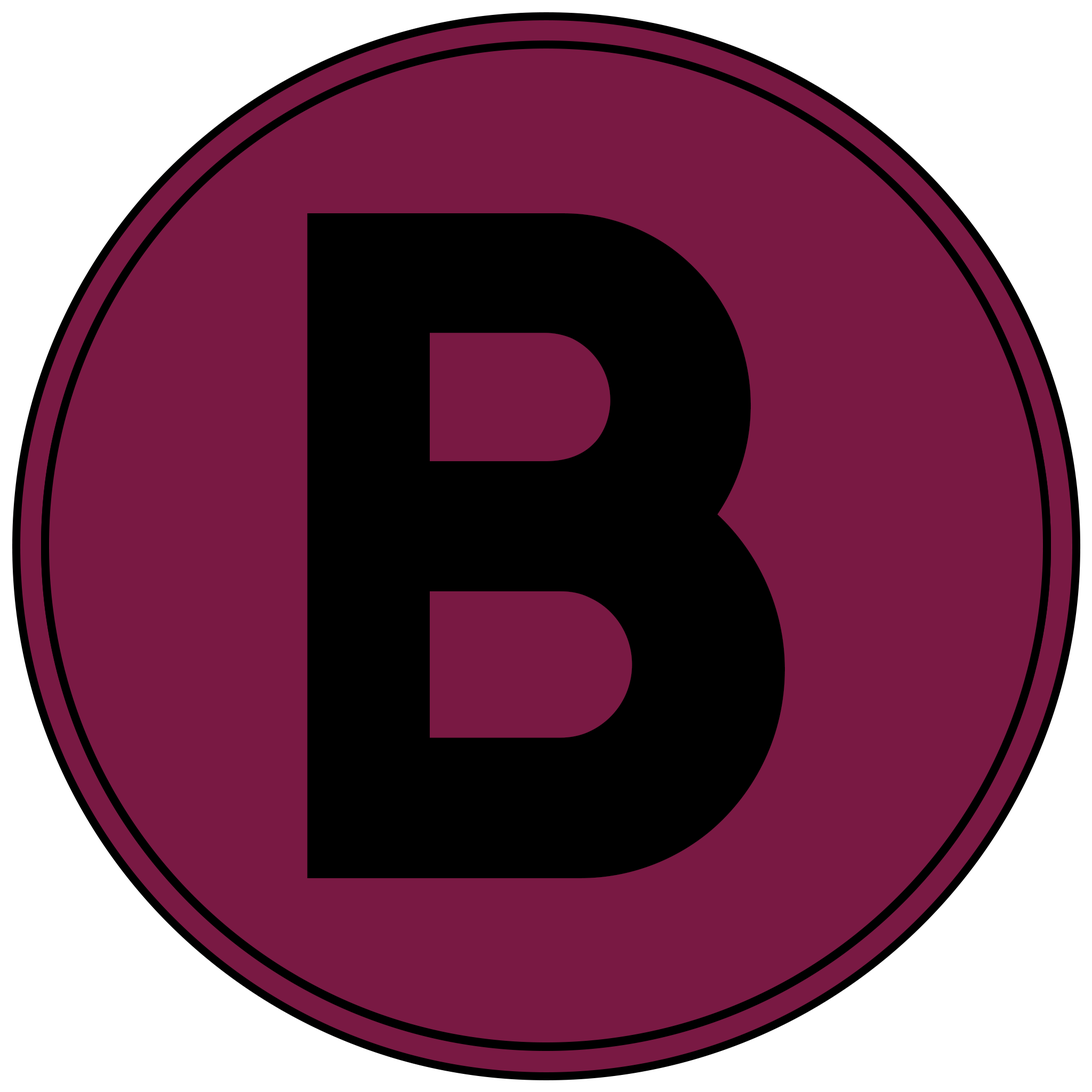
<style>
.page{position:relative;width:1092px;height:1092px;background:#791943}
.page>*{position:absolute;margin:0}
.t1{font:949.5px "HotelDeParisXe";color:#000000}
</style>
<div class="page">
<p class="t1" style="left:307px;top:213px;width:478px;height:665px">B</p>
</div>
